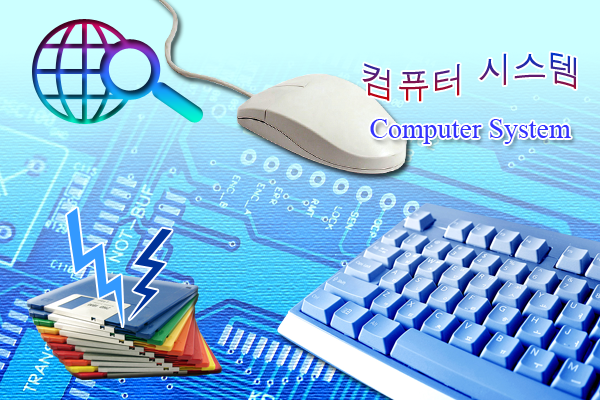
<style>
.page{position:relative;width:600px;height:400px}
.page>*{position:absolute;margin:0}
.t1{font:35px "Dotum"}
.t2{font:28px "TimesNewRomanPSMT";color:#3333ff}
</style>
<div class="page">
<p class="t1" style="left:362px;top:52px;width:215px;height:50px">컴퓨터 시스템</p>
<p class="t2" style="left:370px;top:119px;width:201px;height:25px">Computer System</p>
</div>
